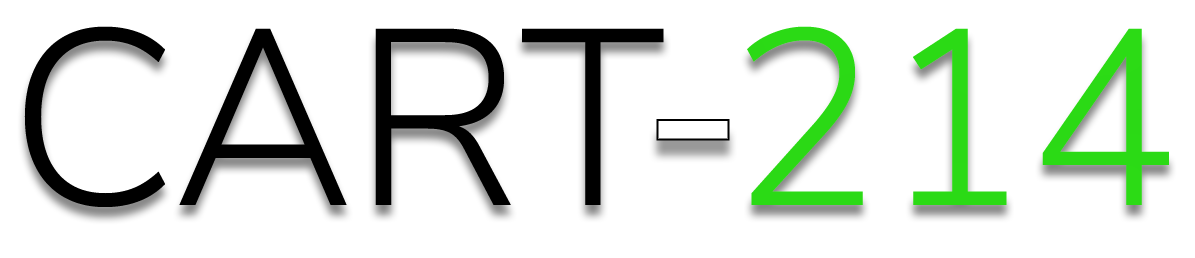
<style>
.page{position:relative;width:1195px;height:258px;background:#ffffff}
.page>*{position:absolute;margin:0}
.t1{font:250px "NunitoSans-Light";color:#000000}
.t2{font:250px "NunitoSans-Light";color:#2de216}
</style>
<div class="page">
<p class="t1" style="left:24px;top:26px;width:1145px;height:181px">CART <span class="t2">214</span></p>
</div>
